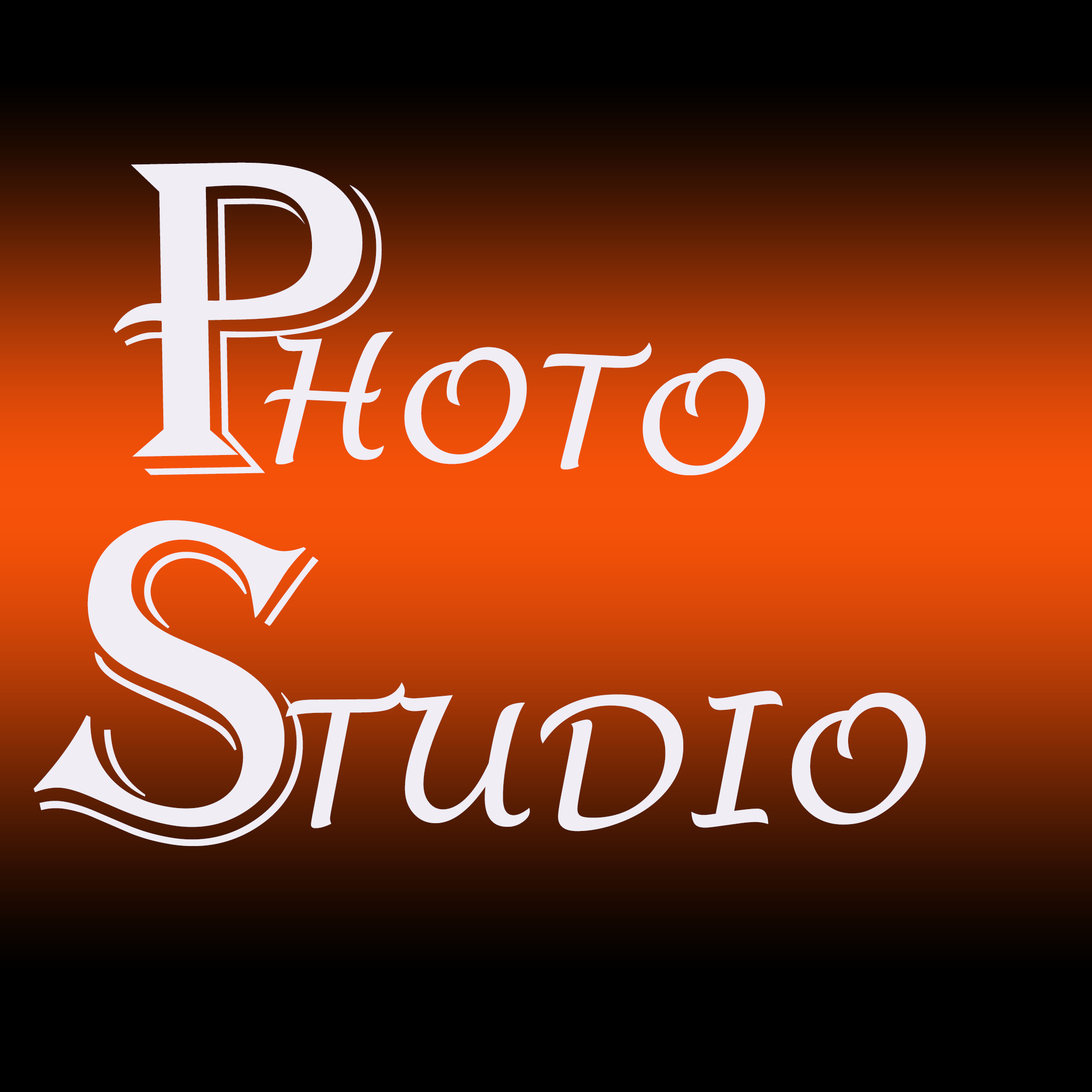
<style>
.page{position:relative;width:1092px;height:1092px}
.page>*{position:absolute;margin:0}
.t1{font:465.9px "Algerian";color:#f0edf5}
.t2{font:156.2px "LucidaHandwriting-Italic";color:#f0edf5}
.t3{font:467.2px "Algerian";color:#f0edf5}
.t4{font:173.3px "LucidaHandwriting-Italic";color:#f0edf5}
</style>
<div class="page">
<p class="t1" style="left:113px;top:162px;width:269px;height:313px;rotate:-1deg">p</p>
<p class="t2" style="left:264px;top:331px;width:501px;height:144px;rotate:3deg">HOTO</p>
<p class="t3" style="left:33px;top:520px;width:286px;height:326px;rotate:10deg">s</p>
<p class="t4" style="left:285px;top:682px;width:641px;height:149px">TUDIO</p>
</div>
